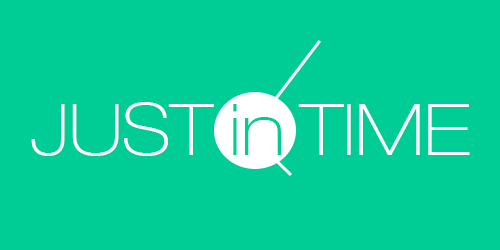
<style>
.page{position:relative;width:500px;height:250px;background:#00cd96}
.page>*{position:absolute;margin:0}
.t1{font:72px "HelveticaNeueLTCom-ThEx";color:#ffffff}
.t2{font:72px "HelveticaNeueLTCom-ThEx";color:#00cd96}
</style>
<div class="page">
<p class="t1" style="left:31px;top:102px;width:439px;height:54px">JUST<span class="t2"> in</span> TIME</p>
</div>
